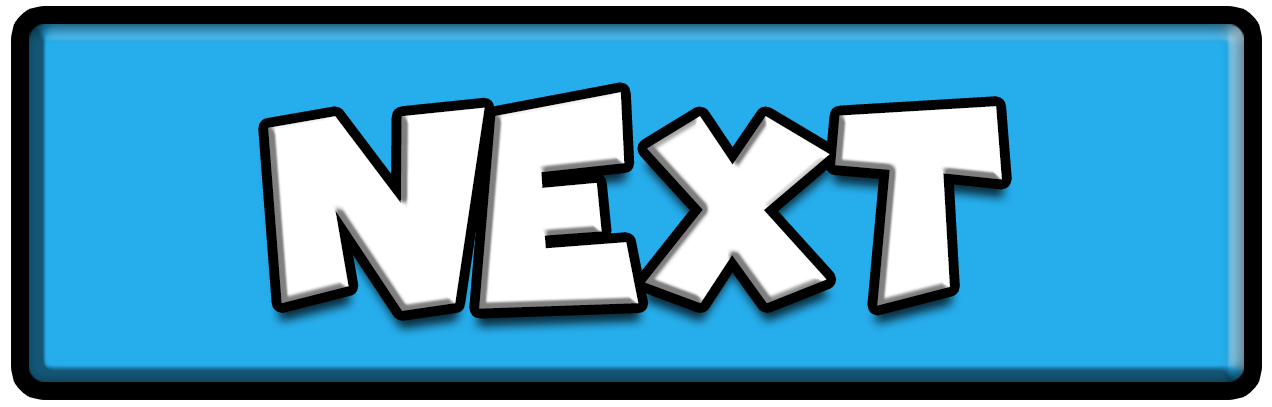
<style>
.page{position:relative;width:1272px;height:407px;background:#26adec}
.page>*{position:absolute;margin:0}
.t1{font:273.1px "Funhouse";color:#ffffff}
</style>
<div class="page">
<p class="t1" style="left:268px;top:92px;width:734px;height:219px">NEXT</p>
</div>
